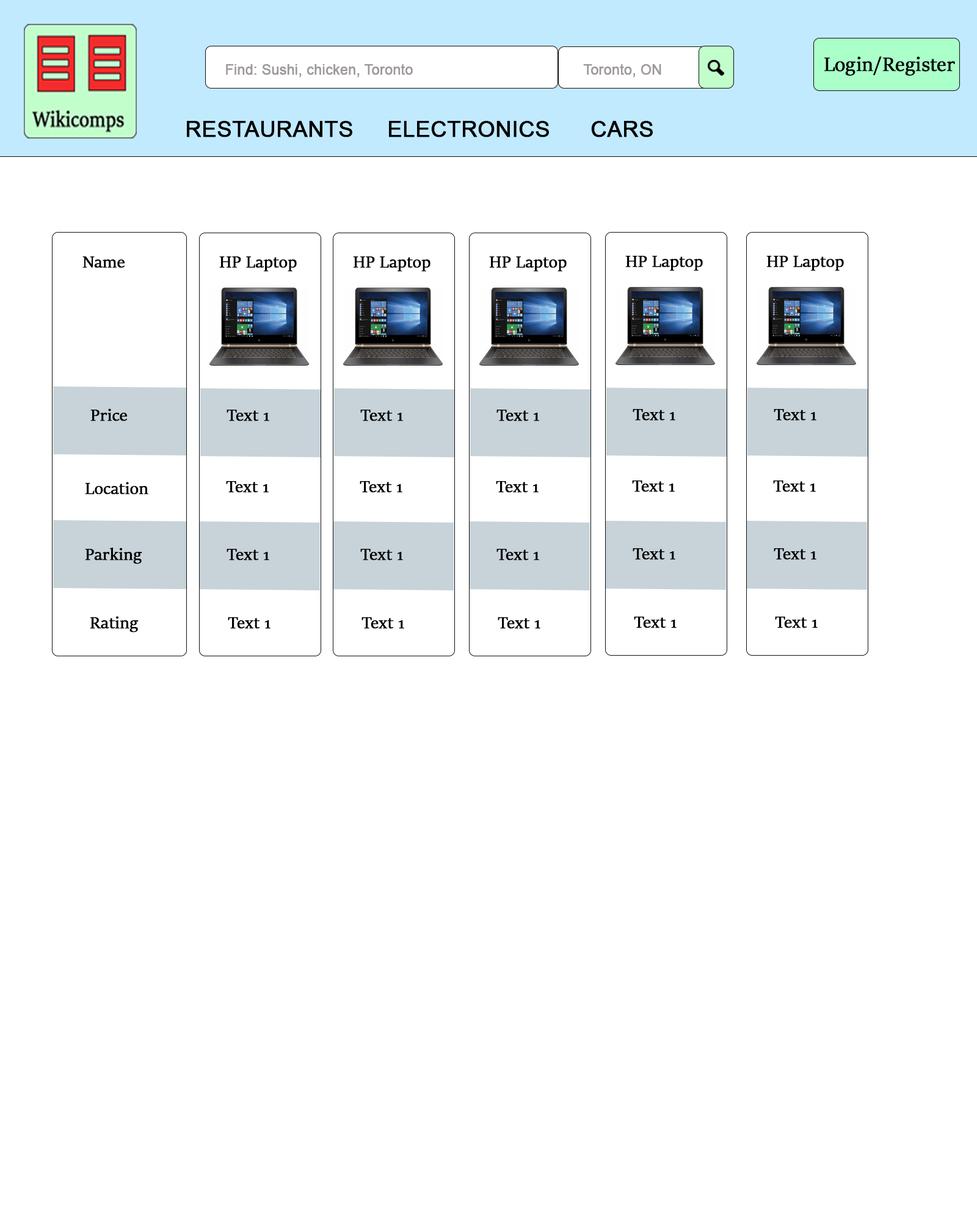
<style>
.page{position:relative;width:977px;height:1221px;background:#ffffff}
.page>*{position:absolute;margin:0}
.t1{font:14.8px "ArialMT";color:#9f9999;font-weight:bold;scale:0.93 1}
.t2{font:21.7px "SitkaBanner";color:#000000;font-weight:bold}
.t3{font:22px "ArialMT";color:#000000;font-weight:bold}
.t4{font:18.3px "SitkaBanner";color:#000000;font-weight:bold}
</style>
<div class="page">
<p class="t1" style="left:226px;top:63px;width:187px;height:15px">Find: Sushi, chicken, Toronto</p>
<p class="t1" style="left:583px;top:63px;width:78px;height:15px">Toronto, ON</p>
<p class="t2" style="left:823px;top:56px;width:132px;height:20px">Login/Register</p>
<p class="t3" style="left:187px;top:121px;width:362px;height:16px">RESTAURANTS     ELECTRONICS</p>
<p class="t3" style="left:591px;top:121px;width:62px;height:16px">CARS</p>
<p class="t4" style="left:82px;top:256px;width:43px;height:12px">Name</p>
<p class="t4" style="left:219px;top:256px;width:78px;height:16px">HP Laptop</p>
<p class="t4" style="left:353px;top:256px;width:77px;height:16px">HP Laptop</p>
<p class="t4" style="left:489px;top:256px;width:77px;height:16px">HP Laptop</p>
<p class="t4" style="left:625px;top:256px;width:78px;height:15px">HP Laptop</p>
<p class="t4" style="left:766px;top:256px;width:78px;height:15px">HP Laptop</p>
<p class="t4" style="left:90px;top:408px;width:37px;height:13px">Price</p>
<p class="t4" style="left:226px;top:410px;width:43px;height:11px">Text 1</p>
<p class="t4" style="left:360px;top:410px;width:43px;height:11px">Text 1</p>
<p class="t4" style="left:496px;top:410px;width:43px;height:11px">Text 1</p>
<p class="t4" style="left:632px;top:409px;width:43px;height:12px">Text 1</p>
<p class="t4" style="left:773px;top:409px;width:43px;height:12px">Text 1</p>
<p class="t4" style="left:85px;top:482px;width:63px;height:12px">Location</p>
<p class="t4" style="left:226px;top:481px;width:43px;height:12px">Text 1</p>
<p class="t4" style="left:360px;top:481px;width:42px;height:12px">Text 1</p>
<p class="t4" style="left:496px;top:481px;width:42px;height:12px">Text 1</p>
<p class="t4" style="left:632px;top:480px;width:43px;height:12px">Text 1</p>
<p class="t4" style="left:773px;top:480px;width:43px;height:12px">Text 1</p>
<p class="t4" style="left:85px;top:548px;width:57px;height:16px">Parking</p>
<p class="t4" style="left:226px;top:549px;width:43px;height:11px">Text 1</p>
<p class="t4" style="left:360px;top:549px;width:43px;height:11px">Text 1</p>
<p class="t4" style="left:496px;top:549px;width:43px;height:11px">Text 1</p>
<p class="t4" style="left:632px;top:548px;width:43px;height:12px">Text 1</p>
<p class="t4" style="left:773px;top:548px;width:43px;height:12px">Text 1</p>
<p class="t4" style="left:90px;top:616px;width:49px;height:16px">Rating</p>
<p class="t4" style="left:228px;top:617px;width:42px;height:12px">Text 1</p>
<p class="t4" style="left:361px;top:617px;width:43px;height:12px">Text 1</p>
<p class="t4" style="left:498px;top:617px;width:42px;height:12px">Text 1</p>
<p class="t4" style="left:634px;top:617px;width:42px;height:11px">Text 1</p>
<p class="t4" style="left:775px;top:617px;width:42px;height:11px">Text 1</p>
</div>
